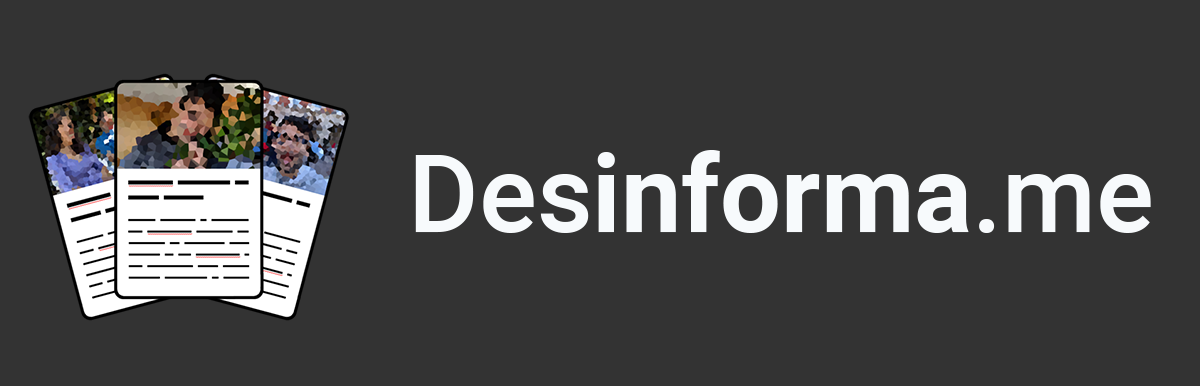
<style>
.page{position:relative;width:1200px;height:386px;background:#333333}
.page>*{position:absolute;margin:0}
.t1{font:108px "Roboto-Bold";color:#f7fafc}
.t2{font:108px "Roboto-Medium";color:#f7fafc}
</style>
<div class="page">
<p class="t1" style="left:415px;top:150px;width:736px;height:83px"><span class="t2">Des</span>informa<span class="t2">.me</span></p>
</div>
